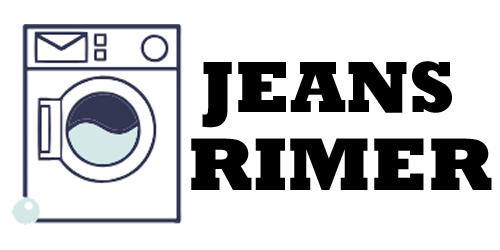
<style>
.page{position:relative;width:500px;height:250px;background:#ffffff}
.page>*{position:absolute;margin:0}
.t1{font:73.9px "Rockwell-ExtraBold";color:#000000}
.t2{font:75.8px "Rockwell-ExtraBold";color:#000000}
</style>
<div class="page">
<p class="t1" style="left:202px;top:61px;width:250px;height:67px">JEANS</p>
<p class="t2" style="left:191px;top:138px;width:301px;height:52px">RIMER</p>
</div>
